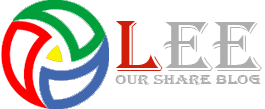
<style>
.page{position:relative;width:265px;height:109px;background:#ffffff}
.page>*{position:absolute;margin:0}
.t1{font:74.7px "Algerian";color:#cf1e09;scale:1.13 1}
.t2{font:74.3px "Algerian";color:#aeaeaf;scale:1.06 1}
.t3{font:14.2px "Algerian";color:#aeaeaf;scale:1.27 1}
</style>
<div class="page">
<p class="t1" style="left:116px;top:21px;width:47px;height:50px">L</p>
<p class="t2" style="left:163px;top:22px;width:50px;height:49px">E</p>
<p class="t2" style="left:212px;top:22px;width:50px;height:49px">E</p>
<p class="t3" style="left:115px;top:75px;width:146px;height:10px">Our share blog</p>
</div>
